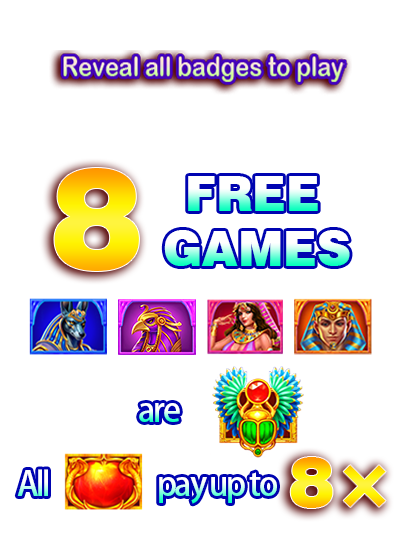
<style>
.page{position:relative;width:404px;height:560px;background:#ffffff}
.page>*{position:absolute;margin:0}
.t1{font:139.7px "304-CAI978"}
.t2{font:48px "304-CAI978"}
.t3{font:33px "AdobeHeitiStd-Regular";letter-spacing:-0.075em}
.t4{font:69.3px "304-CAI978"}
</style>
<div class="page">
<p class="t1" style="left:54px;top:168px;width:85px;height:103px">8</p>
<p class="t2" style="left:188px;top:176px;width:130px;height:35px">FREE</p>
<p class="t2" style="left:164px;top:230px;width:186px;height:36px">GAMES</p>
<p class="t3" style="left:139px;top:403px;width:41px;height:19px">are</p>
<p class="t4" style="left:290px;top:457px;width:96px;height:51px">8×</p>
<p class="t3" style="left:17px;top:469px;width:260px;height:35px">All                      pay up to</p>
</div>
